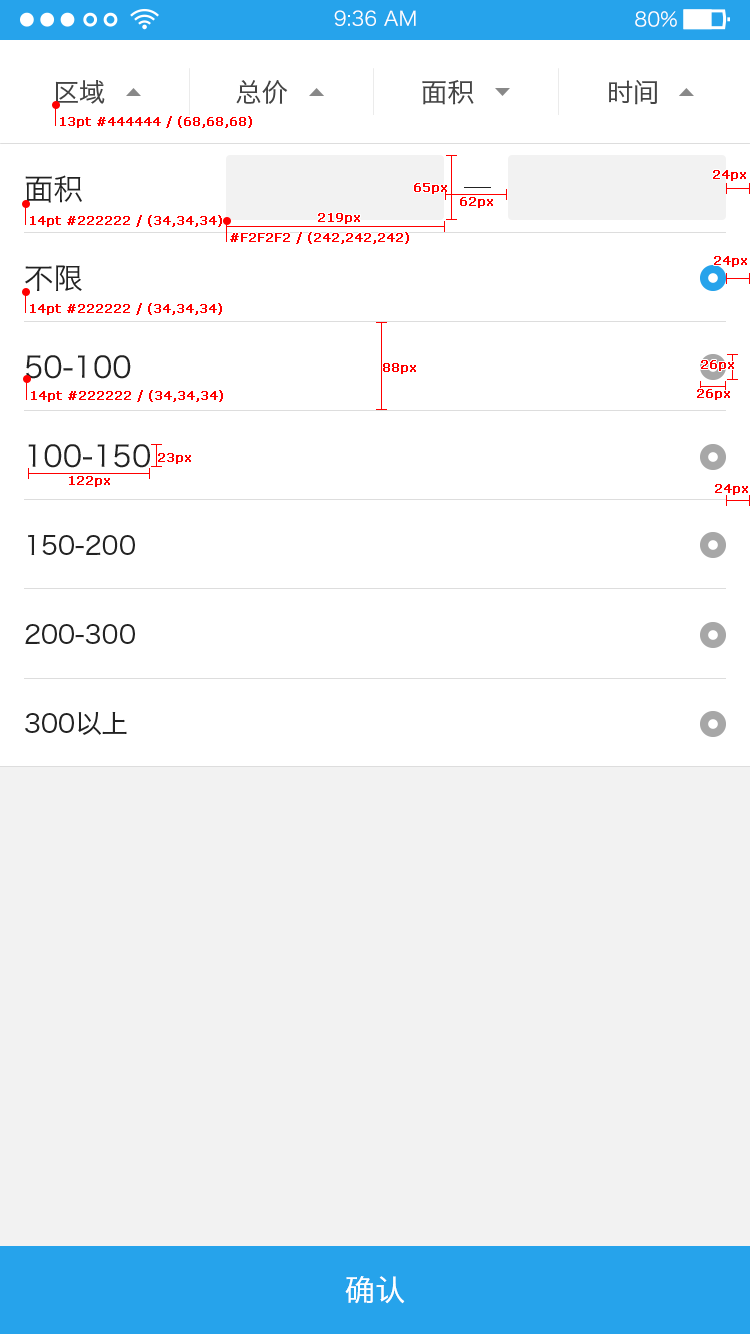
<style>
.page{position:relative;width:750px;height:1334px;background:#ffffff}
.page>*{position:absolute;margin:0}
.t1{font:19.5px "HiraginoSansGB-W3";color:#ffffff}
.t2{font:26px "HiraginoSansGB-W3";color:#444444}
.t3{font:12px "Verdana";color:#ff0000;font-weight:bold}
.t4{font:29.3px "HiraginoSansGB-W3";letter-spacing:0.005em;color:#222222}
.t5{font:26px "HiraginoSansGB-W3";color:#222222}
.t6{font:30px "HiraginoSansGB-W3";letter-spacing:0.002em;color:#ffffff}
</style>
<div class="page">
<p class="t1" style="left:334px;top:10px;width:82px;height:16px">9:36 AM</p>
<p class="t1" style="left:635px;top:11px;width:42px;height:16px">80%</p>
<p class="t2" style="left:55px;top:80px;width:50px;height:24px">区域</p>
<p class="t2" style="left:236px;top:80px;width:52px;height:24px">总价</p>
<p class="t2" style="left:422px;top:80px;width:52px;height:25px">面积</p>
<p class="t2" style="left:609px;top:80px;width:48px;height:25px">时间</p>
<p class="t3" style="left:60px;top:116px;width:192px;height:12px">13pt #444444 / (68,68,68)</p>
<p class="t3" style="left:713px;top:170px;width:33px;height:11px">24px</p>
<p class="t4" style="left:25px;top:175px;width:57px;height:28px">面积</p>
<p class="t3" style="left:414px;top:183px;width:33px;height:11px">65px</p>
<p class="t3" style="left:460px;top:197px;width:33px;height:11px">62px</p>
<p class="t3" style="left:30px;top:215px;width:192px;height:12px">14pt #222222 / (34,34,34)</p>
<p class="t3" style="left:318px;top:213px;width:42px;height:11px">219px</p>
<p class="t3" style="left:230px;top:232px;width:179px;height:12px">#F2F2F2 / (242,242,242)</p>
<p class="t3" style="left:714px;top:256px;width:33px;height:11px">24px</p>
<p class="t4" style="left:25px;top:265px;width:57px;height:26px">不限</p>
<p class="t3" style="left:30px;top:303px;width:192px;height:12px">14pt #222222 / (34,34,34)</p>
<p class="t4" style="left:26px;top:355px;width:105px;height:24px">50-100</p>
<p class="t3" style="left:383px;top:363px;width:33px;height:11px">88px</p>
<p class="t3" style="left:701px;top:360px;width:33px;height:11px">26px</p>
<p class="t3" style="left:31px;top:390px;width:192px;height:12px">14pt #222222 / (34,34,34)</p>
<p class="t3" style="left:697px;top:389px;width:33px;height:11px">26px</p>
<p class="t4" style="left:28px;top:444px;width:122px;height:24px">100-150</p>
<p class="t3" style="left:158px;top:453px;width:33px;height:11px">23px</p>
<p class="t3" style="left:69px;top:476px;width:41px;height:11px">122px</p>
<p class="t3" style="left:715px;top:484px;width:33px;height:11px">24px</p>
<p class="t5" style="left:28px;top:535px;width:107px;height:20px">150-200</p>
<p class="t5" style="left:25px;top:624px;width:110px;height:20px">200-300</p>
<p class="t5" style="left:25px;top:712px;width:102px;height:23px">300以上</p>
<p class="t6" style="left:345px;top:1276px;width:60px;height:28px">确认</p>
</div>
